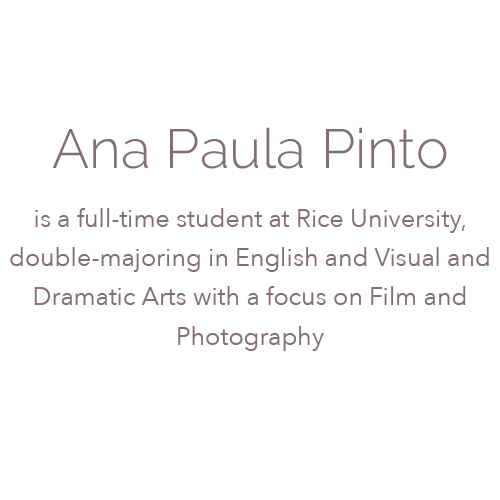
<style>
.page{position:relative;width:500px;height:500px;background:#ffffff}
.page>*{position:absolute;margin:0}
.t1{font:25px/39.2px "AvenirNext-Regular";color:#826e73}
.t2{font:55px/82.7px "Raleway-Light";letter-spacing:0.005em;color:#826e73}
</style>
<div class="page">
<p class="t1" style="left:10px;top:127px;width:479px;height:224px;text-align:center"><span class="t2">Ana Paula Pinto<br><br></span>is a full-time student at Rice University, double-majoring in English and Visual and Dramatic Arts with a focus on Film and Photography</p>
</div>
